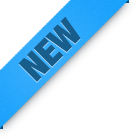
<style>
.page{position:relative;width:139px;height:139px;background:#ffffff}
.page>*{position:absolute;margin:0}
.t1{font:36px "HelveticaNeue-CondensedBlack";color:#175e8d}
</style>
<div class="page">
<p class="t1" style="left:18px;top:16px;width:63px;height:66px;rotate:-45deg">NEW</p>
</div>
